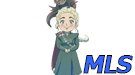
<style>
.page{position:relative;width:135px;height:75px;background:#ffffff}
.page>*{position:absolute;margin:0}
.t1{font:24px "Tahoma-Bold";letter-spacing:-0.065em;font-weight:bold;font-style:italic}
</style>
<div class="page">
<p class="t1" style="left:83px;top:55px;width:50px;height:19px">MLS</p>
</div>
